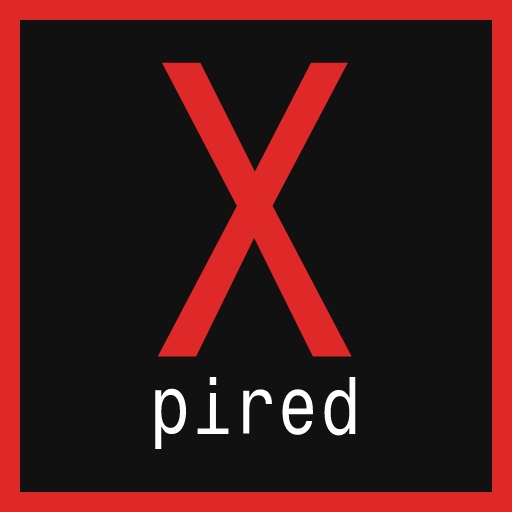
<style>
.page{position:relative;width:512px;height:512px;background:#111111}
.page>*{position:absolute;margin:0}
.t1{font:384px "MonospaceTypewriter";color:#df2828}
.t2{font:72px "MonospaceTypewriter";color:#ffffff}
</style>
<div class="page">
<p class="t1" style="left:157px;top:62px;width:195px;height:295px">X</p>
<p class="t2" style="left:155px;top:377px;width:201px;height:72px">pired</p>
</div>
